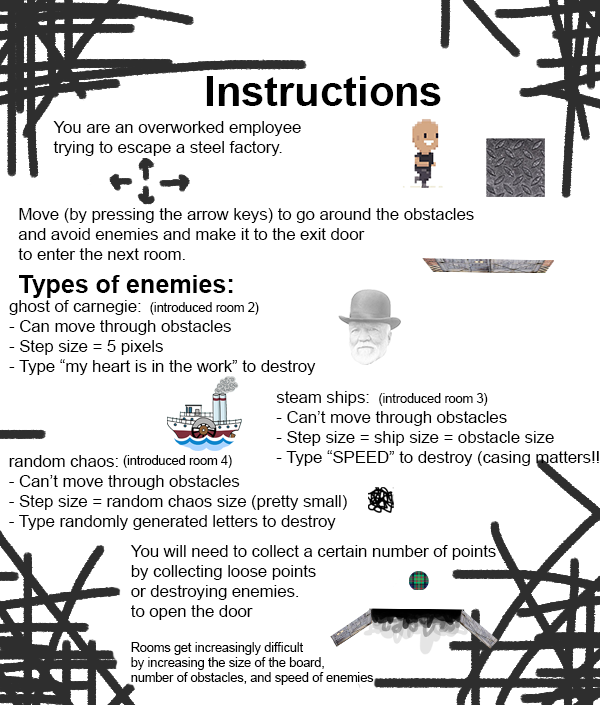
<style>
.page{position:relative;width:600px;height:705px;background:#ffffff}
.page>*{position:absolute;margin:0}
.t1{font:41.7px "Arial-BoldMT";color:#000000}
.t2{font:16.7px "ArialMT";color:#000000}
.t3{font:25px "Arial-BoldMT";color:#000000}
.t4{font:12.5px "ArialMT";color:#000000}
</style>
<div class="page">
<p class="t1" style="left:206px;top:76px;width:235px;height:30px">Instructions</p>
<p class="t2" style="left:53px;top:121px;width:248px;height:35px">You are an overworked employee <br>trying to escape a steel factory.</p>
<p class="t2" style="left:18px;top:208px;width:456px;height:52px">Move (by pressing the arrow keys) to go around the obstacles  <br>and avoid enemies and make it to the exit door  <br>to enter the next room.</p>
<p class="t3" style="left:19px;top:275px;width:214px;height:23px">Types of enemies:</p>
<p class="t2" style="left:9px;top:300px;width:307px;height:75px">ghost of carnegie:<br>- Can move through obstacles<br>- Step size = 5 pixels<br>- Type “my heart is in the work” to destroy</p>
<p class="t4" style="left:150px;top:302px;width:109px;height:13px">(introduced room 2)</p>
<p class="t4" style="left:379px;top:393px;width:109px;height:13px">(introduced room 3)</p>
<p class="t2" style="left:9px;top:455px;width:338px;height:75px">random chaos:<br>- Can’t move through obstacles<br>- Step size = random chaos size (pretty small)<br>- Type randomly generated letters to destroy</p>
<p class="t4" style="left:123px;top:455px;width:109px;height:13px">(introduced room 4)</p>
<p class="t2" style="left:130px;top:545px;width:366px;height:140px">You will need to collect a certain number of points <br>by collecting loose points  <br>or destroying enemies. <br>to open the door  <br><br><span class="t4">Rooms get increasingly difficult <br>by increasing the size of the board, <br>number of obstacles, and speed of enemies</span></p>
</div>
